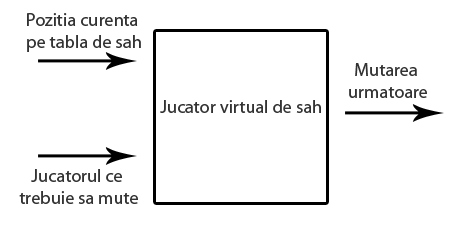
<style>
.page{position:relative;width:453px;height:226px;background:#ffffff}
.page>*{position:absolute;margin:0}
.t1{font:18.3px "MyriadPro-Regular";color:#333333}
</style>
<div class="page">
<p class="t1" style="left:27px;top:13px;width:114px;height:39px;text-align:center">Pozitia curenta <br>pe tabla de sah</p>
<p class="t1" style="left:349px;top:63px;width:78px;height:35px;text-align:center">Mutarea <br>urmatoare</p>
<p class="t1" style="left:160px;top:100px;width:161px;height:13px">Jucator virtual de sah</p>
<p class="t1" style="left:19px;top:169px;width:119px;height:35px;text-align:center">Jucatorul ce <br>trebuie sa mute</p>
</div>
